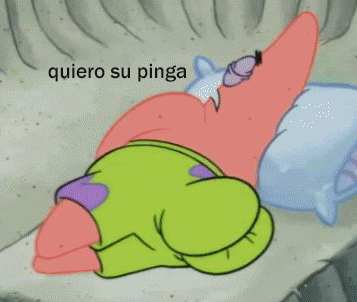
<style>
.page{position:relative;width:357px;height:302px}
.page>*{position:absolute;margin:0}
.t1{font:21.2px "FranklinGothic-Medium";color:#191319}
</style>
<div class="page">
<p class="t1" style="left:48px;top:63px;width:139px;height:19px">quiero su pinga</p>
</div>
